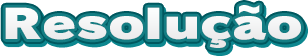
<style>
.page{position:relative;width:308px;height:56px;background:#ffffff}
.page>*{position:absolute;margin:0}
.t1{font:40px "RodinPro-UB";letter-spacing:-0.005em;color:#f2f3f3;scale:1.36 1}
</style>
<div class="page">
<p class="t1" style="left:5px;top:5px;width:296px;height:43px">Resolução</p>
</div>
